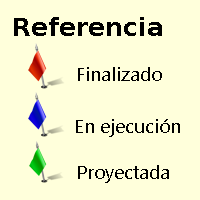
<style>
.page{position:relative;width:200px;height:200px;background:#ffffdb}
.page>*{position:absolute;margin:0}
.t1{font:25.3px "BitstreamVeraSans-Bold";color:#000000}
.t2{font:18.7px "SegoeUI";color:#000000}
</style>
<div class="page">
<p class="t1" style="left:14px;top:17px;width:148px;height:19px">Referencia</p>
<p class="t2" style="left:78px;top:67px;width:84px;height:14px">Finalizado</p>
<p class="t2" style="left:76px;top:119px;width:104px;height:18px">En ejecución</p>
<p class="t2" style="left:78px;top:165px;width:91px;height:18px">Proyectada</p>
</div>
